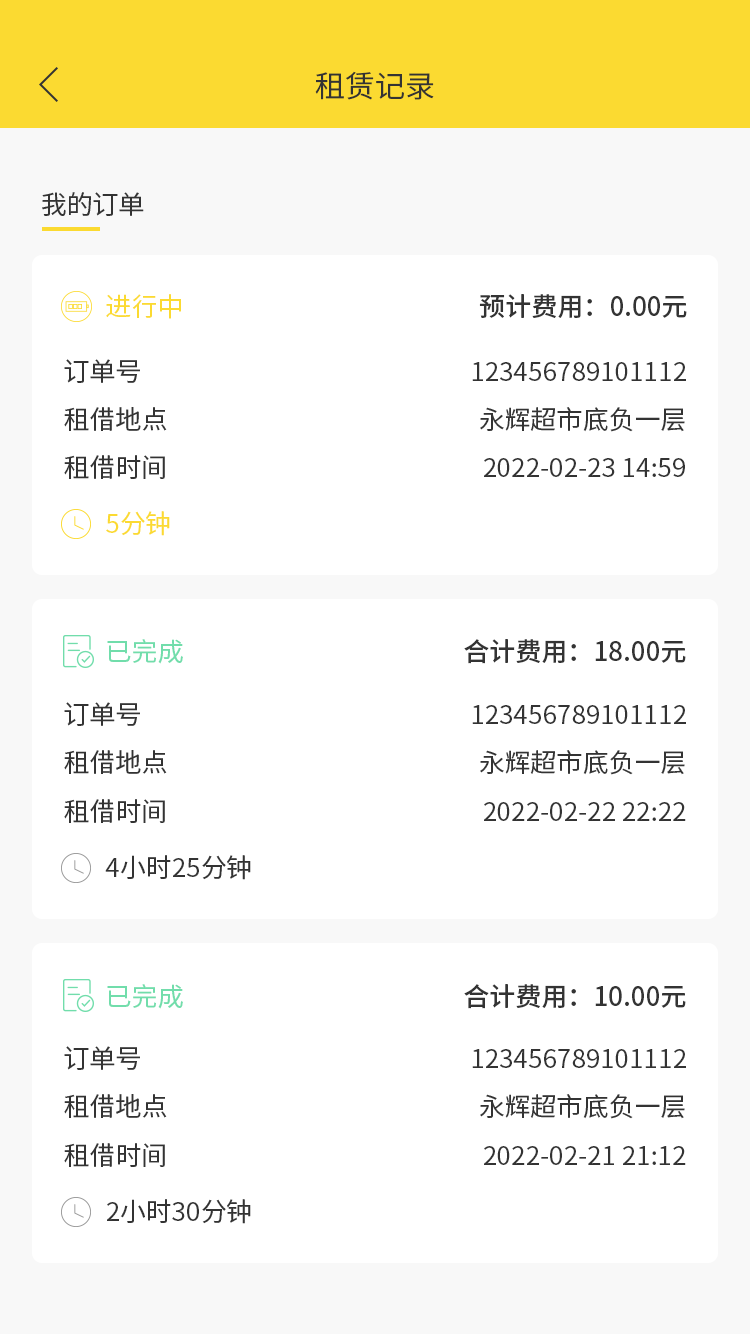
<style>
.page{position:relative;width:750px;height:1334px;background:#ffffff}
.page>*{position:absolute;margin:0}
.t1{font:30px "SourceHanSansSC-Normal";color:#333333}
.t2{font:26px "SourceHanSansSC-Regular";color:#333333}
.t3{font:26px "SourceHanSansSC-Regular";color:#fbda31}
.t4{font:26px "SourceHanSansSC-Medium";color:#333333}
.t5{font:26px "SourceHanSansSC-Regular";color:#71ddab}
</style>
<div class="page">
<p class="t1" style="left:315px;top:71px;width:119px;height:29px">租赁记录</p>
<p class="t2" style="left:42px;top:192px;width:102px;height:24px">我的订单</p>
<p class="t3" style="left:106px;top:294px;width:75px;height:25px">进行中</p>
<p class="t4" style="left:479px;top:294px;width:208px;height:24px">预计费用：0.00元</p>
<p class="t2" style="left:64px;top:359px;width:76px;height:24px">订单号</p>
<p class="t2" style="left:472px;top:362px;width:214px;height:19px">123456789101112</p>
<p class="t2" style="left:64px;top:407px;width:103px;height:24px">租借地点</p>
<p class="t2" style="left:480px;top:407px;width:205px;height:25px">永辉超市底负一层</p>
<p class="t2" style="left:64px;top:455px;width:101px;height:24px">租借时间</p>
<p class="t2" style="left:484px;top:458px;width:201px;height:19px">2022-02-23 14:59</p>
<p class="t3" style="left:106px;top:511px;width:64px;height:25px">5分钟</p>
<p class="t5" style="left:107px;top:639px;width:76px;height:25px">已完成</p>
<p class="t4" style="left:464px;top:639px;width:222px;height:25px">合计费用：18.00元</p>
<p class="t2" style="left:64px;top:702px;width:76px;height:24px">订单号</p>
<p class="t2" style="left:472px;top:705px;width:214px;height:19px">123456789101112</p>
<p class="t2" style="left:64px;top:750px;width:103px;height:24px">租借地点</p>
<p class="t2" style="left:480px;top:750px;width:205px;height:25px">永辉超市底负一层</p>
<p class="t2" style="left:64px;top:799px;width:101px;height:24px">租借时间</p>
<p class="t2" style="left:484px;top:802px;width:202px;height:19px">2022-02-22 22:22</p>
<p class="t2" style="left:105px;top:855px;width:146px;height:25px">4小时25分钟</p>
<p class="t5" style="left:107px;top:984px;width:76px;height:25px">已完成</p>
<p class="t4" style="left:464px;top:984px;width:222px;height:25px">合计费用：10.00元</p>
<p class="t2" style="left:64px;top:1046px;width:76px;height:24px">订单号</p>
<p class="t2" style="left:472px;top:1049px;width:214px;height:19px">123456789101112</p>
<p class="t2" style="left:64px;top:1094px;width:103px;height:24px">租借地点</p>
<p class="t2" style="left:480px;top:1094px;width:205px;height:25px">永辉超市底负一层</p>
<p class="t2" style="left:64px;top:1143px;width:101px;height:24px">租借时间</p>
<p class="t2" style="left:484px;top:1146px;width:202px;height:19px">2022-02-21 21:12</p>
<p class="t2" style="left:107px;top:1199px;width:144px;height:25px">2小时30分钟</p>
</div>
